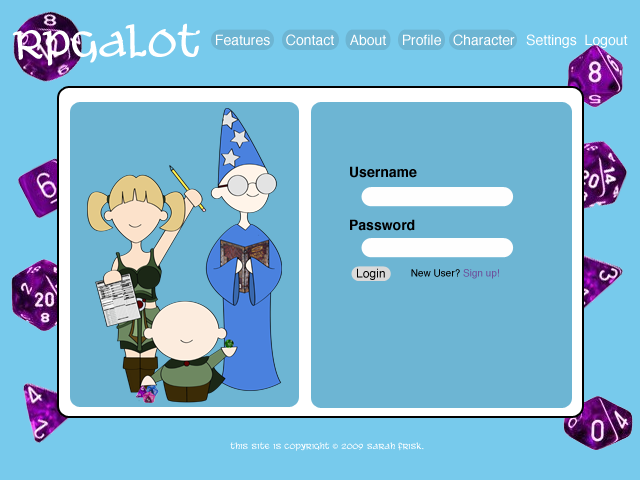
<style>
.page{position:relative;width:640px;height:480px;background:#6db5d3}
.page>*{position:absolute;margin:0}
.t1{font:40px "AleandWenchesBB";color:#ffffff}
.t2{font:14px "Helvetica";color:#ffffff}
.t3{font:14px "Helvetica-Bold";color:#000000}
.t4{font:12px "Helvetica";color:#000000}
.t5{font:10px "Helvetica";color:#000000}
.t6{font:10px "Helvetica";color:#6d529c}
.t7{font:8px "AleandWenchesBB";color:#ffffff}
.t8{font:8px "MyriadPro-Regular";color:#ffffff}
</style>
<div class="page">
<p class="t1" style="left:12px;top:23px;width:188px;height:43px">RPGALOT</p>
<p class="t2" style="left:216px;top:34px;width:412px;height:14px">Features    Contact    About    Profile   Character   Settings  Logout</p>
<p class="t3" style="left:350px;top:166px;width:67px;height:12px">Username</p>
<p class="t3" style="left:350px;top:219px;width:65px;height:12px">Password</p>
<p class="t4" style="left:357px;top:268px;width:28px;height:12px">Login</p>
<p class="t5" style="left:411px;top:269px;width:88px;height:10px">New User? <span class="t6">Sign up!</span></p>
<p class="t7" style="left:230px;top:442px;width:194px;height:9px">This site is copyright <span class="t8">©</span> 2009 Sarah Frisk.</p>
</div>
